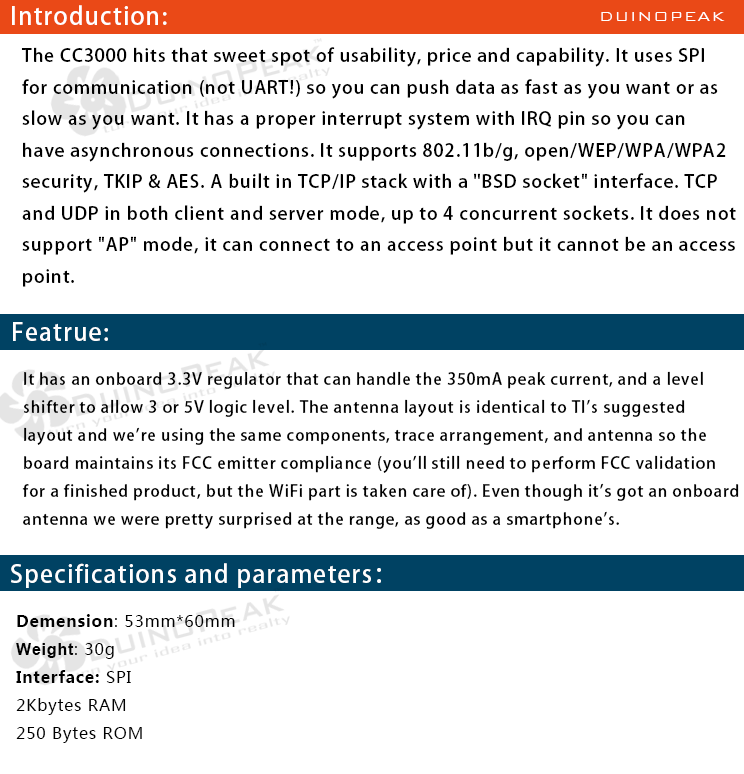
<style>
.page{position:relative;width:744px;height:774px;background:#ffffff}
.page>*{position:absolute;margin:0}
.t1{font:24px "AdobeHeitiStd-Regular";letter-spacing:0.05em;color:#ffffff}
.t2{font:18px "BankGothicBT-Light";letter-spacing:0.05em;color:#ffffff}
.t3{font:18px "AdobeHeitiStd-Regular";letter-spacing:0.05em;color:#000000}
.t4{font:16px "AdobeHeitiStd-Regular";letter-spacing:0.05em;color:#000000}
.t5{font:16px "MicrosoftYaHei";letter-spacing:0.05em;color:#000000}
.t6{font:16px "MicrosoftYaHei-Bold";letter-spacing:0.05em;color:#000000}
.t7{font:16px "Arial-BoldMT";letter-spacing:0.05em;color:#000000}
</style>
<div class="page">
<p class="t1" style="left:12px;top:5px;width:155px;height:20px">Introduction:</p>
<p class="t2" style="left:601px;top:12px;width:124px;height:9px">DUINOPEAK</p>
<p class="t3" style="left:21px;top:47px;width:715px;height:240px">The CC3000 hits that sweet spot of usability, price and capability. It uses SPI <br>for communication (not UART!) so you can push data as fast as you want or as<br>slow as you want. It has a proper interrupt system with IRQ pin so you can<br>have asynchronous connections. It supports 802.11b/g, open/WEP/WPA/WPA2<br>security, TKIP &amp; AES. A built in TCP/IP stack with a "BSD socket" interface. TCP <br>and UDP in both client and server mode, up to 4 concurrent sockets. It does not <br>support "AP" mode, it can connect to an access point but it cannot be an access <br>point.</p>
<p class="t1" style="left:13px;top:322px;width:95px;height:19px">Featrue:</p>
<p class="t4" style="left:22px;top:371px;width:717px;height:158px">It has an onboard 3.3V regulator that can handle the 350mA peak current, and a level <br>shifter to allow 3 or 5V logic level. The antenna layout is identical to TI's suggested <br>layout and we're using the same components, trace arrangement, and antenna so the <br>board maintains its FCC emitter compliance (you'll still need to perform FCC validation <br>for a finished product, but the WiFi part is taken care of). Even though it's got an onboard <br>antenna we were pretty surprised at the range, as good as a smartphone's.</p>
<p class="t1" style="left:11px;top:563px;width:370px;height:25px">Specifications and parameters：</p>
<p class="t5" style="left:16px;top:614px;width:219px;height:129px"><span class="t6">Demension</span>: 53mm*60mm<br><span class="t7">Weight</span>: 30g<br><span class="t6">Interface: </span>SPI<br>2Kbytes RAM<br>250 Bytes ROM</p>
</div>
